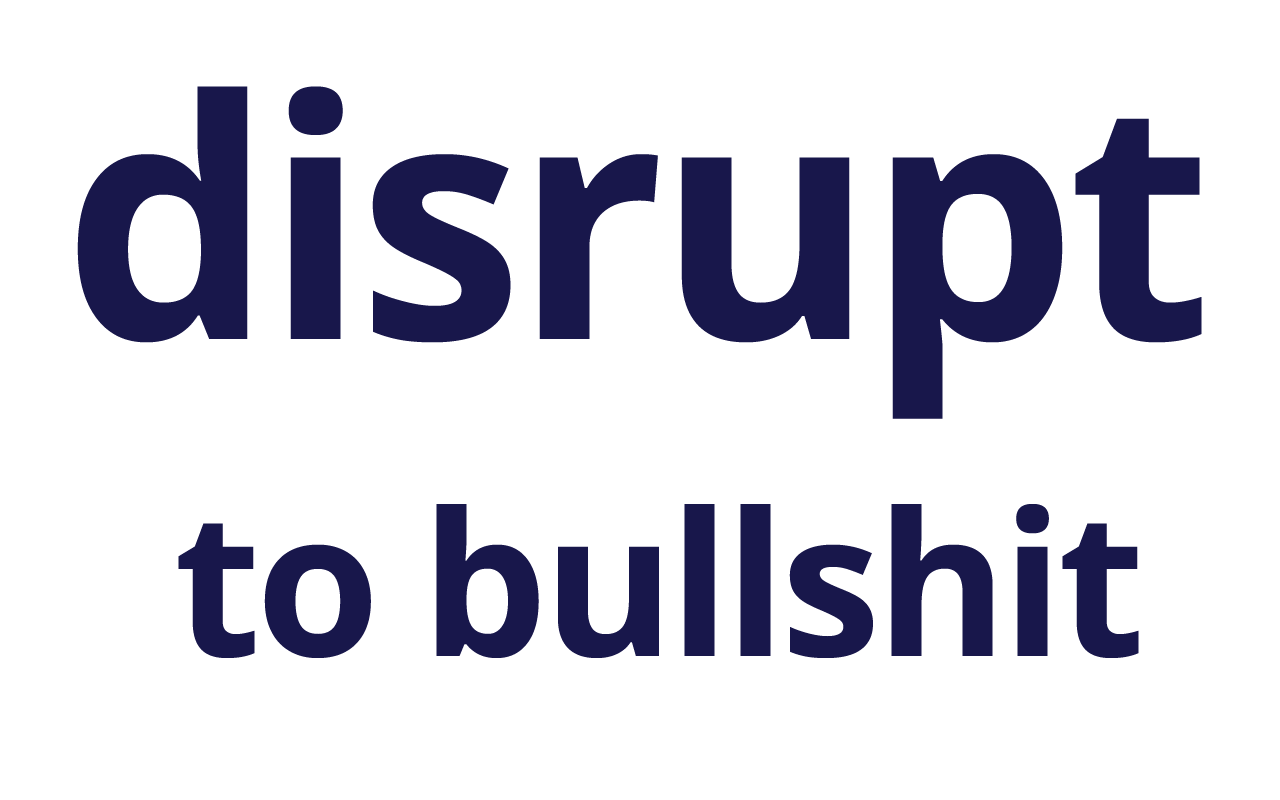
<style>
.page{position:relative;width:1280px;height:800px;background:#ffffff}
.page>*{position:absolute;margin:0}
.t1{font:332.2px "OpenSans-Bold";letter-spacing:-0.025em;color:#18174b}
.t2{font:200px "OpenSans-Bold";letter-spacing:-0.025em;color:#18174b}
</style>
<div class="page">
<p class="t1" style="left:77px;top:86px;width:1125px;height:333px">disrupt</p>
<p class="t2" style="left:178px;top:504px;width:961px;height:154px">to bullshit</p>
</div>
